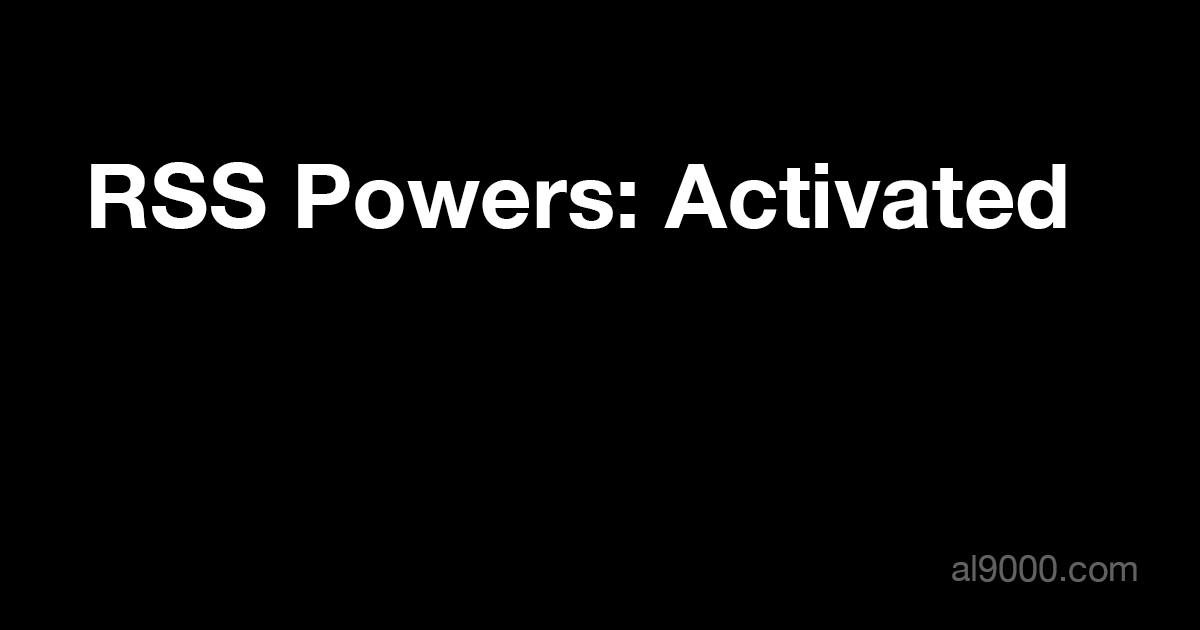
<style>
.page{position:relative;width:1200px;height:630px;background:#000000}
.page>*{position:absolute;margin:0}
.t1{font:90px "HelveticaNeue-Bold";color:#ffffff}
.t2{font:36px "HelveticaNeue";color:#616161}
</style>
<div class="page">
<p class="t1" style="left:91px;top:162px;width:975px;height:68px">RSS Powers: Activated</p>
<p class="t2" style="left:952px;top:555px;width:185px;height:27px">al9000.com</p>
</div>
